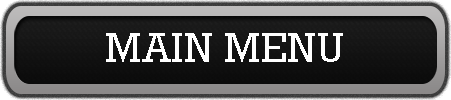
<style>
.page{position:relative;width:451px;height:100px}
.page>*{position:absolute;margin:0}
.t1{font:41.7px "Rockwell";color:#ffffff}
</style>
<div class="page">
<p class="t1" style="left:106px;top:33px;width:237px;height:29px">MAIN MENU</p>
</div>
